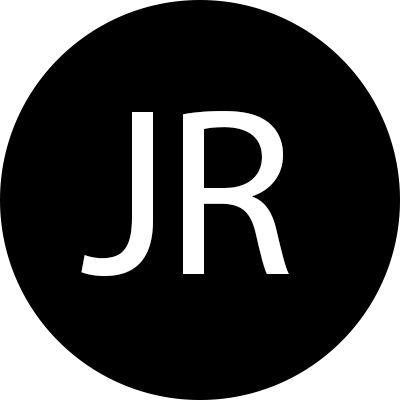
<style>
.page{position:relative;width:400px;height:400px;background:#000000}
.page>*{position:absolute;margin:0}
.t1{font:240.4px "MyriadPro-Regular";color:#ffffff}
</style>
<div class="page">
<p class="t1" style="left:81px;top:111px;width:208px;height:165px">JR</p>
</div>
